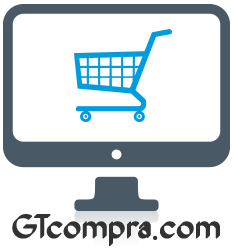
<style>
.page{position:relative;width:234px;height:248px;background:#ffffff}
.page>*{position:absolute;margin:0}
.t1{font:36px "OakWood";color:#323232;font-weight:bold}
</style>
<div class="page">
<p class="t1" style="left:12px;top:214px;width:208px;height:33px">GTcompra.com</p>
</div>
